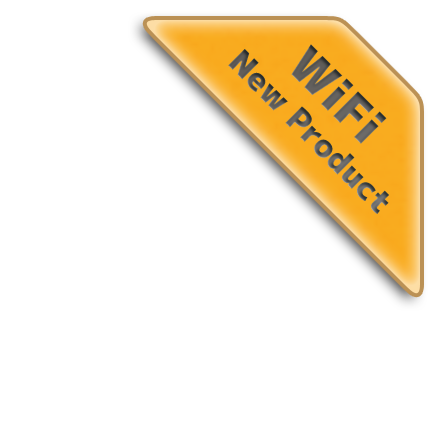
<style>
.page{position:relative;width:440px;height:440px;background:#ffffff}
.page>*{position:absolute;margin:0}
.t1{font:32px "mplus-1p-black";color:#5e5c5a}
.t2{font:48px "mplus-1p-black";color:#5e5c5a}
</style>
<div class="page">
<p class="t1" style="left:228px;top:44px;width:161px;height:170px;text-align:center;rotate:45deg"><span class="t2">WiFi <br></span>New Product</p>
</div>
